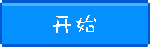
<style>
.page{position:relative;width:150px;height:47px;background:#0590ff}
.page>*{position:absolute;margin:0}
.t1{font:24px "DFWaWaSC-W5";color:#ffffff}
</style>
<div class="page">
<p class="t1" style="left:53px;top:15px;width:43px;height:18px">开始</p>
</div>
